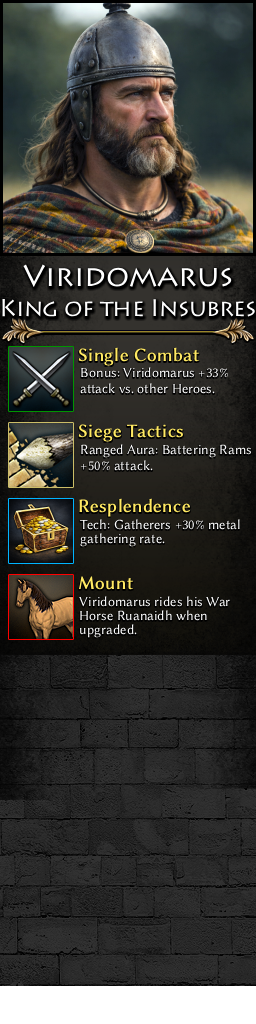
<style>
.page{position:relative;width:256px;height:1024px}
.page>*{position:absolute;margin:0}
.t1{font:24px/30px "Lithos";letter-spacing:-0.025em;color:#ffffff}
.t2{font:30px/30px "Lithos";color:#ffffff}
.t3{font:19px "LinBiolinumO";color:#ffe963;font-weight:bold}
.t4{font:14px "LinBiolinumO";color:#ffffff}
.t5{font:14px/14px "LinBiolinumO";color:#ffffff}
</style>
<div class="page">
<p class="t1" style="left:2px;top:264px;width:253px;height:53px;text-align:center"><span class="t2">Viridomarus<br></span>King of the Insubres</p>
<p class="t3" style="left:78px;top:347px;width:121px;height:19px">Single Combat</p>
<p class="t4" style="left:80px;top:367px;width:148px;height:27px">Bonus: Viridomarus +33%<br>attack vs. other Heroes.</p>
<p class="t3" style="left:78px;top:424px;width:105px;height:18px">Siege Tactics</p>
<p class="t4" style="left:80px;top:444px;width:171px;height:27px">Ranged Aura: Battering Rams<br>+50% attack.</p>
<p class="t3" style="left:79px;top:498px;width:112px;height:19px">Resplendence</p>
<p class="t5" style="left:80px;top:519px;width:160px;height:28px">Tech: Gatherers +30% metal <br>gathering rate.</p>
<p class="t3" style="left:78px;top:576px;width:55px;height:14px">Mount</p>
<p class="t5" style="left:79px;top:596px;width:151px;height:42px">Viridomarus rides his War <br>Horse Ruanaidh when <br>upgraded.</p>
</div>
